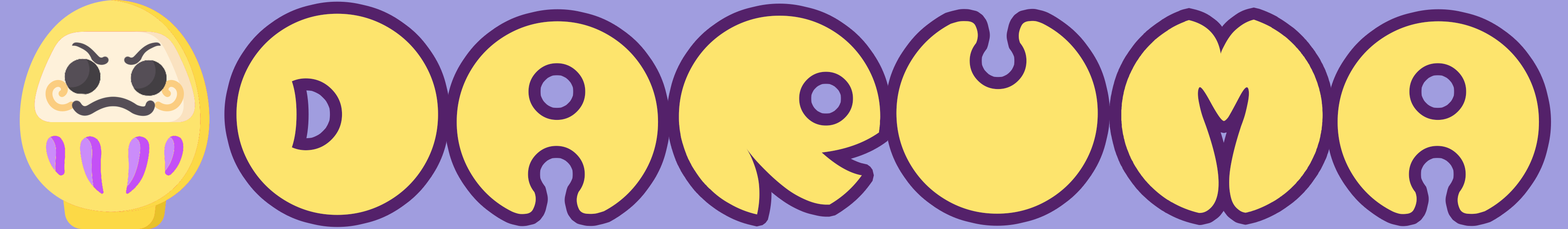
<style>
.page{position:relative;width:1568px;height:229px;background:#fde46d}
.page>*{position:absolute;margin:0}
.t1{font:244.7px "LunaNueva";letter-spacing:-0.1em;color:#fde46d}
</style>
<div class="page">
<p class="t1" style="left:236px;top:13px;width:1303px;height:202px">DARUMA</p>
</div>
